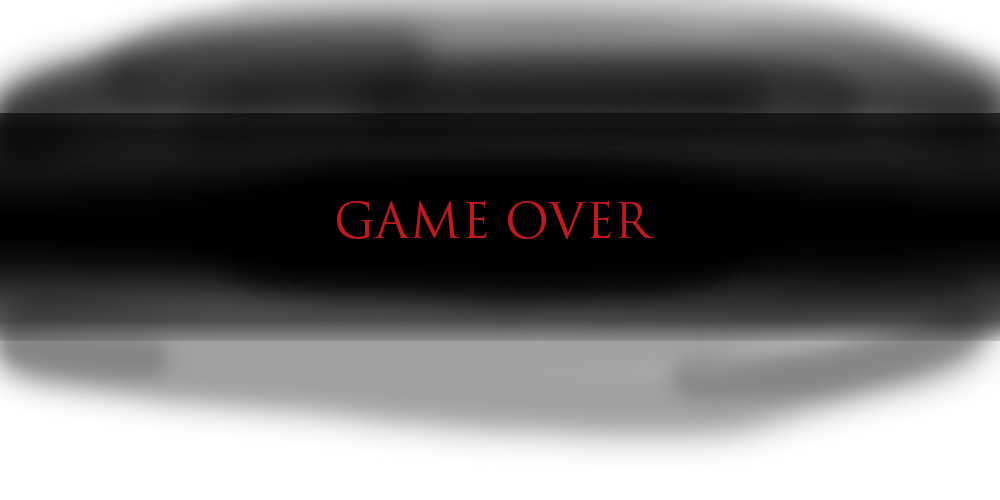
<style>
.page{position:relative;width:1000px;height:500px}
.page>*{position:absolute;margin:0}
.t1{font:48px "TrajanPro-Regular";color:#c11a1e}
</style>
<div class="page">
<p class="t1" style="left:337px;top:201px;width:318px;height:38px">GAME OVER</p>
</div>
